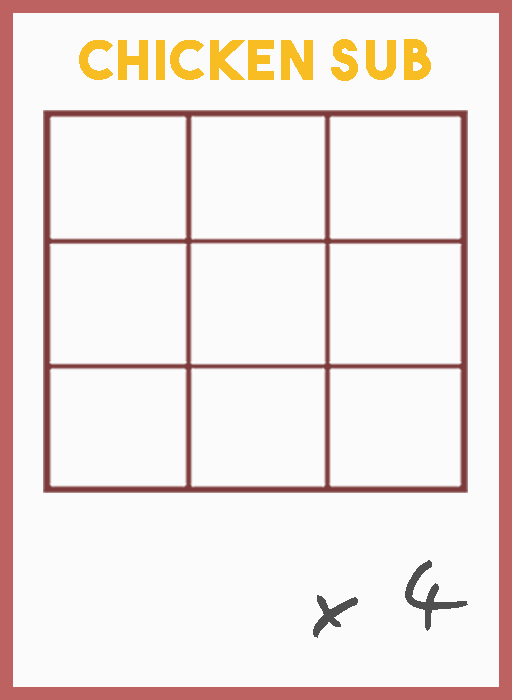
<style>
.page{position:relative;width:512px;height:700px;background:#fbfbfb}
.page>*{position:absolute;margin:0}
.t1{font:54.5px "TheBoldFont";letter-spacing:0.05em;color:#f7bd22}
.t2{font:106.1px "EasySpeech";letter-spacing:0.05em;color:#4f4f4f}
</style>
<div class="page">
<p class="t1" style="left:79px;top:39px;width:352px;height:42px">chicken sub</p>
<p class="t2" style="left:313px;top:560px;width:155px;height:78px">x 4</p>
</div>
